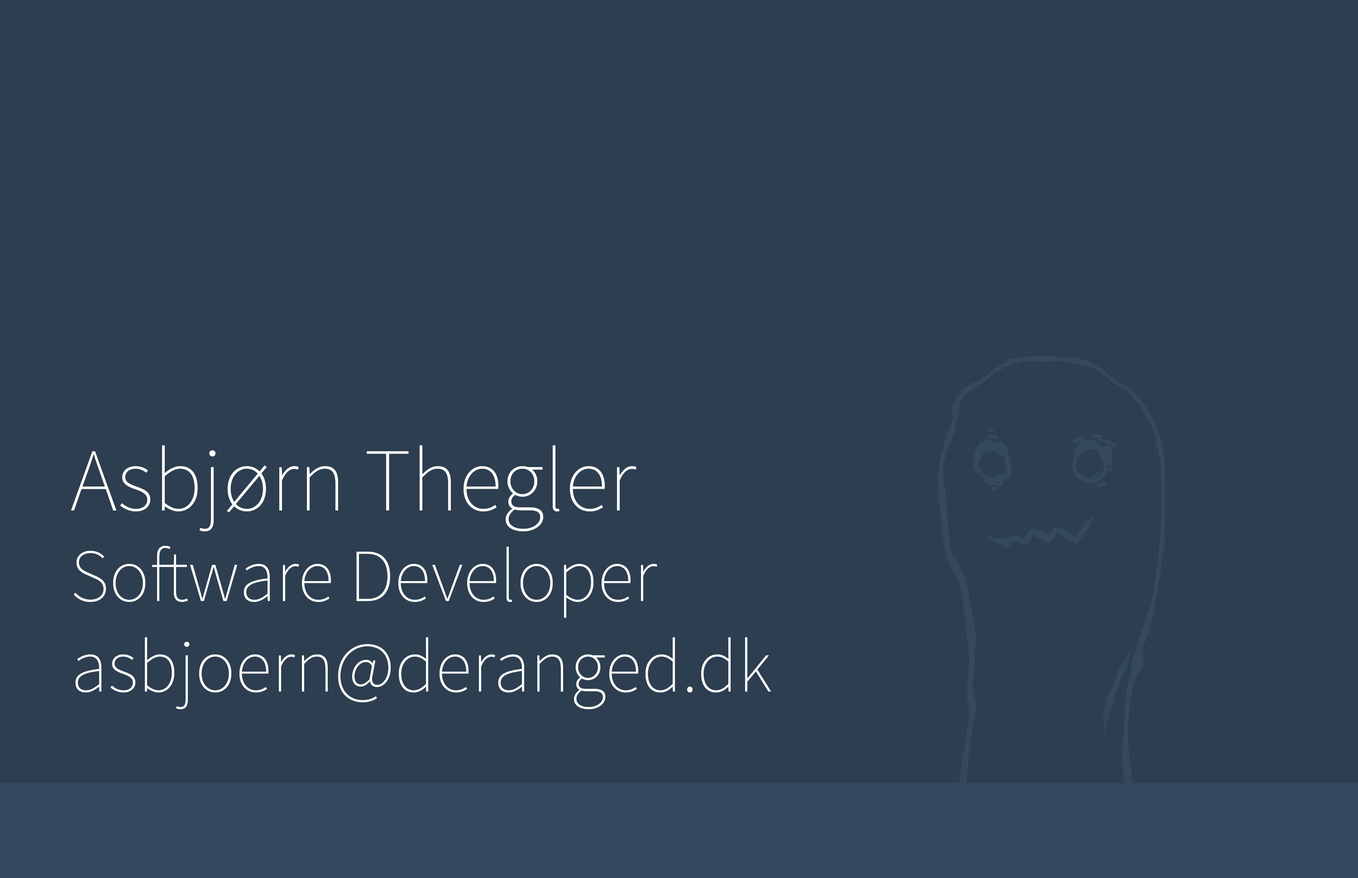
<style>
.page{position:relative;width:1358px;height:878px;background:#2c3e50}
.page>*{position:absolute;margin:0}
.t1{font:75.4px "SourceSansPro-ExtraLight";color:#ffffff}
.t2{font:90.5px "SourceSansPro-ExtraLight";color:#ffffff}
</style>
<div class="page">
<p class="t1" style="left:71px;top:445px;width:700px;height:265px;text-align:right"><span class="t2">Asbjørn Thegler<br></span>Software Developer<br>asbjoern@deranged.dk</p>
</div>
